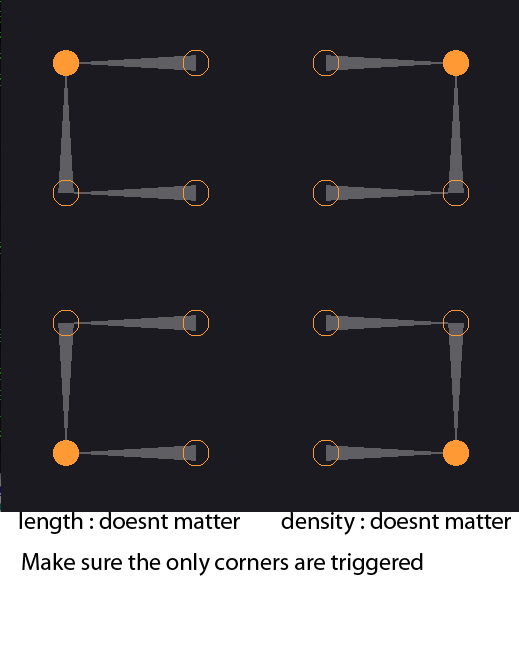
<style>
.page{position:relative;width:519px;height:648px;background:#1a1a20}
.page>*{position:absolute;margin:0}
.t1{font:24px "MyriadPro-Regular";color:#000000}
</style>
<div class="page">
<p class="t1" style="left:19px;top:512px;width:492px;height:23px">length : doesnt matter        density : doesnt matter</p>
<p class="t1" style="left:22px;top:553px;width:401px;height:23px">Make sure the only corners are triggered</p>
</div>
